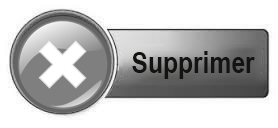
<style>
.page{position:relative;width:278px;height:128px;background:#ffffff}
.page>*{position:absolute;margin:0}
.t1{font:30px "ArialNarrow-Bold";color:#131312}
</style>
<div class="page">
<p class="t1" style="left:132px;top:51px;width:123px;height:28px">Supprimer</p>
</div>
